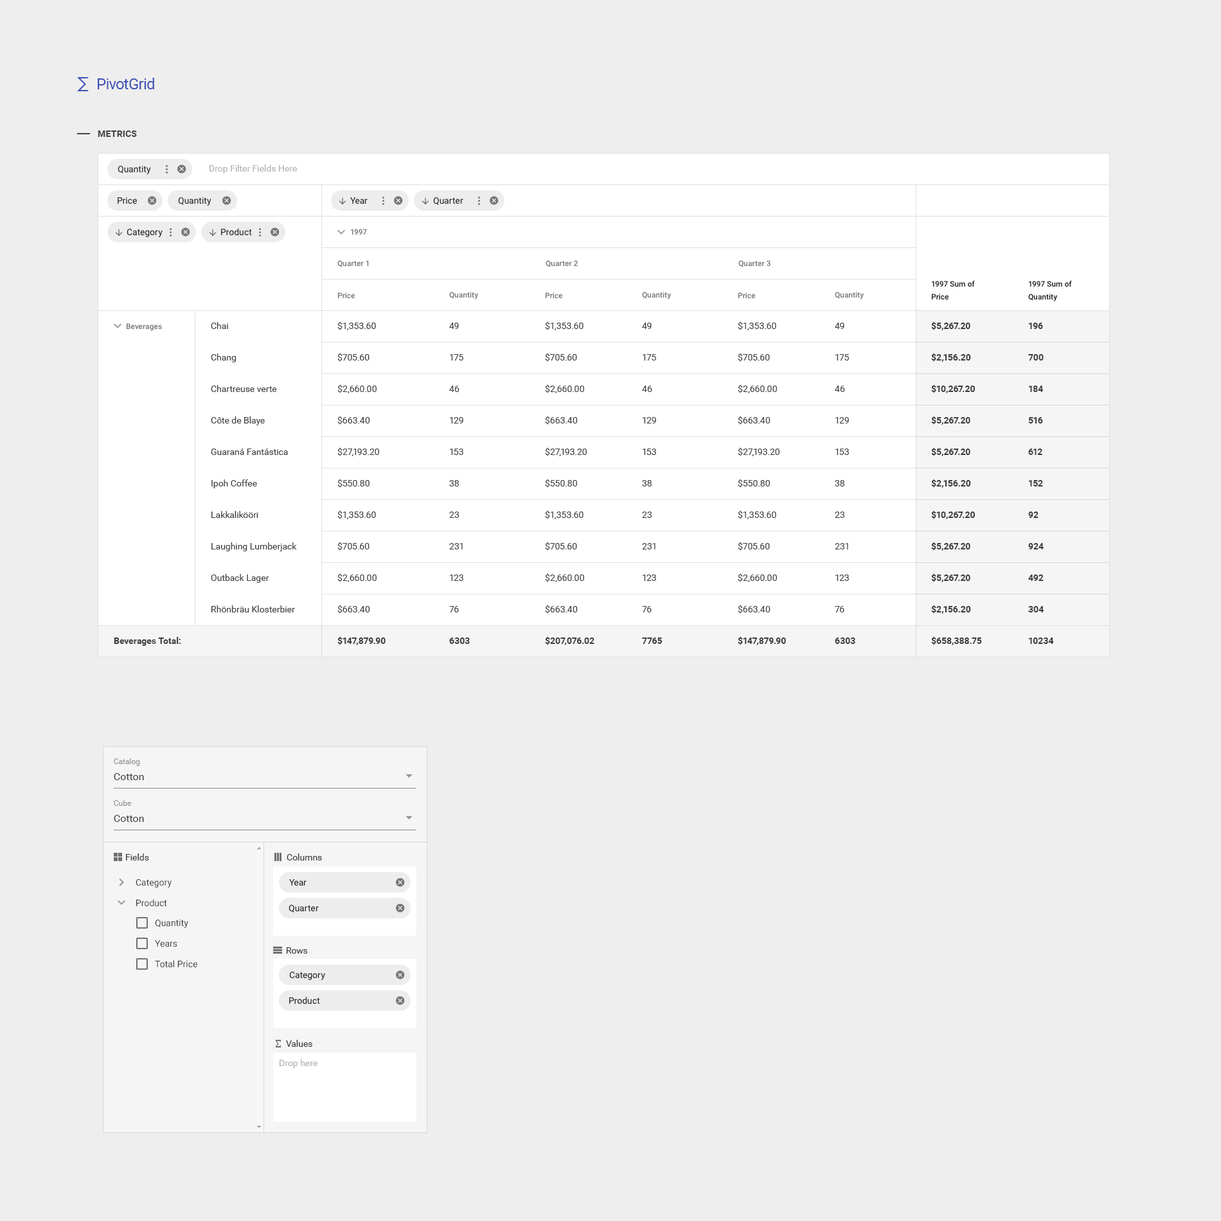
<style>
.page{position:relative;width:1221px;height:1221px;background:#eeeeee}
.page>*{position:absolute;margin:0}
.t1{font:15.4px "Roboto-Regular";letter-spacing:-0.025em;color:#3f51b5}
.t2{font:9px "Roboto-Bold";letter-spacing:0.01em;color:#454545;text-transform:uppercase}
.t3{font:9px "Roboto-Regular";color:#1f1f1f}
.t4{font:9px "Roboto-Regular";color:#b4b4b4}
.t5{font:7.7px "Roboto-Medium";color:#757575}
.t6{font:7.7px/12.9px "Roboto-Medium";color:#212121}
.t7{font:9px/31.5px "Roboto-Regular";color:#404040}
.t8{font:9px/31.5px "Roboto-Bold";color:#404040}
.t9{font:9px/31.5px "Roboto-Bold";color:#3d3d3d}
.t10{font:9px "Roboto-Bold";color:#3d3d3d}
.t11{font:7.7px "Roboto-Regular";color:#949494}
.t12{font:10.3px "Roboto-Regular";color:#3d3d3d}
.t13{font:9px "Roboto-Regular";color:#3d3d3d}
.t14{font:9px/20.6px "Roboto-Regular";color:#3d3d3d}
.t15{font:9px "Roboto-Regular";color:#3e3e3e}
</style>
<div class="page">
<p class="t1" style="left:98px;top:78px;width:56px;height:11px">PivotGrid</p>
<p class="t2" style="left:98px;top:130px;width:39px;height:7px">Metrics</p>
<p class="t3" style="left:118px;top:166px;width:33px;height:8px">Quantity</p>
<p class="t4" style="left:210px;top:165px;width:87px;height:9px">Drop Filter Fields Here</p>
<p class="t3" style="left:118px;top:197px;width:19px;height:7px">Price</p>
<p class="t3" style="left:178px;top:197px;width:34px;height:9px">Quantity</p>
<p class="t3" style="left:350px;top:197px;width:18px;height:7px">Year</p>
<p class="t3" style="left:433px;top:197px;width:31px;height:8px">Quarter</p>
<p class="t3" style="left:127px;top:229px;width:36px;height:8px">Category</p>
<p class="t3" style="left:221px;top:228px;width:31px;height:8px">Product</p>
<p class="t5" style="left:351px;top:229px;width:16px;height:6px">1997</p>
<p class="t5" style="left:338px;top:260px;width:31px;height:7px">Quarter 1</p>
<p class="t5" style="left:546px;top:260px;width:33px;height:7px">Quarter 2</p>
<p class="t5" style="left:739px;top:260px;width:32px;height:7px">Quarter 3</p>
<p class="t6" style="left:932px;top:280px;width:43px;height:20px">1997 Sum of <br>Price</p>
<p class="t6" style="left:1029px;top:280px;width:43px;height:22px">1997 Sum of <br>Quantity</p>
<p class="t5" style="left:338px;top:292px;width:17px;height:7px">Price</p>
<p class="t5" style="left:449px;top:292px;width:29px;height:8px">Quantity</p>
<p class="t5" style="left:545px;top:292px;width:17px;height:7px">Price</p>
<p class="t5" style="left:642px;top:292px;width:29px;height:8px">Quantity</p>
<p class="t5" style="left:738px;top:292px;width:17px;height:7px">Price</p>
<p class="t5" style="left:835px;top:292px;width:29px;height:8px">Quantity</p>
<p class="t5" style="left:126px;top:323px;width:36px;height:8px">Beverages</p>
<p class="t7" style="left:211px;top:322px;width:86px;height:291px">Chai<br>Chang<br>Chartreuse verte<br>Côte de Blaye<br>Guaraná Fantástica<br>Ipoh Coffee<br>Lakkalikööri<br>Laughing Lumberjack<br>Outback Lager<br>Rhönbräu Klosterbier</p>
<p class="t7" style="left:338px;top:321px;width:48px;height:324px">$1,353.60<br>$705.60<br>$2,660.00<br>$663.40<br>$27,193.20<br>$550.80<br>$1,353.60<br>$705.60<br>$2,660.00<br>$663.40<br><span class="t8">$147,879.90</span></p>
<p class="t7" style="left:449px;top:323px;width:21px;height:321px">49<br>175<br>46<br>129<br>153<br>38<br>23<br>231<br>123<br>76<br><span class="t8">6303</span></p>
<p class="t7" style="left:545px;top:321px;width:50px;height:324px">$1,353.60<br>$705.60<br>$2,660.00<br>$663.40<br>$27,193.20<br>$550.80<br>$1,353.60<br>$705.60<br>$2,660.00<br>$663.40<br><span class="t8">$207,076.02</span></p>
<p class="t7" style="left:642px;top:323px;width:21px;height:321px">49<br>175<br>46<br>129<br>153<br>38<br>23<br>231<br>123<br>76<br><span class="t8">7765</span></p>
<p class="t7" style="left:738px;top:321px;width:48px;height:324px">$1,353.60<br>$705.60<br>$2,660.00<br>$663.40<br>$27,193.20<br>$550.80<br>$1,353.60<br>$705.60<br>$2,660.00<br>$663.40<br><span class="t8">$147,879.90</span></p>
<p class="t7" style="left:835px;top:323px;width:21px;height:321px">49<br>175<br>46<br>129<br>153<br>38<br>23<br>231<br>123<br>76<br><span class="t8">6303</span></p>
<p class="t9" style="left:932px;top:321px;width:50px;height:324px">$5,267.20<br>$2,156.20<br>$10,267.20<br>$5,267.20<br>$5,267.20<br>$2,156.20<br>$10,267.20<br>$5,267.20<br>$5,267.20<br>$2,156.20<br>$658,388.75</p>
<p class="t9" style="left:1029px;top:323px;width:25px;height:321px">196<br>700<br>184<br>516<br>612<br>152<br>92<br>924<br>492<br>304<br>10234</p>
<p class="t10" style="left:114px;top:637px;width:67px;height:9px">Beverages Total:</p>
<p class="t11" style="left:114px;top:759px;width:26px;height:7px">Catalog</p>
<p class="t12" style="left:114px;top:773px;width:30px;height:7px">Cotton</p>
<p class="t11" style="left:114px;top:800px;width:17px;height:6px">Cube</p>
<p class="t12" style="left:114px;top:815px;width:30px;height:7px">Cotton</p>
<p class="t13" style="left:126px;top:854px;width:23px;height:7px">Fields</p>
<p class="t13" style="left:287px;top:854px;width:35px;height:7px">Columns</p>
<p class="t14" style="left:136px;top:879px;width:36px;height:28px">Category<br>Product</p>
<p class="t3" style="left:289px;top:879px;width:18px;height:8px">Year</p>
<p class="t3" style="left:289px;top:905px;width:30px;height:8px">Quarter</p>
<p class="t14" style="left:155px;top:919px;width:42px;height:49px">Quantity<br>Years<br>Total Price</p>
<p class="t15" style="left:287px;top:948px;width:21px;height:6px">Rows</p>
<p class="t3" style="left:289px;top:972px;width:36px;height:8px">Category</p>
<p class="t3" style="left:289px;top:997px;width:31px;height:8px">Product</p>
<p class="t13" style="left:286px;top:1040px;width:26px;height:7px">Values</p>
<p class="t4" style="left:280px;top:1059px;width:38px;height:9px">Drop here</p>
</div>
